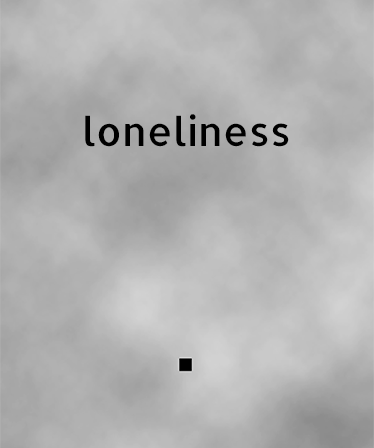
<style>
.page{position:relative;width:374px;height:448px}
.page>*{position:absolute;margin:0}
.t1{font:39.9px "Allerta-Regular";color:#000000}
</style>
<div class="page">
<p class="t1" style="left:85px;top:114px;width:204px;height:33px">loneliness</p>
</div>
